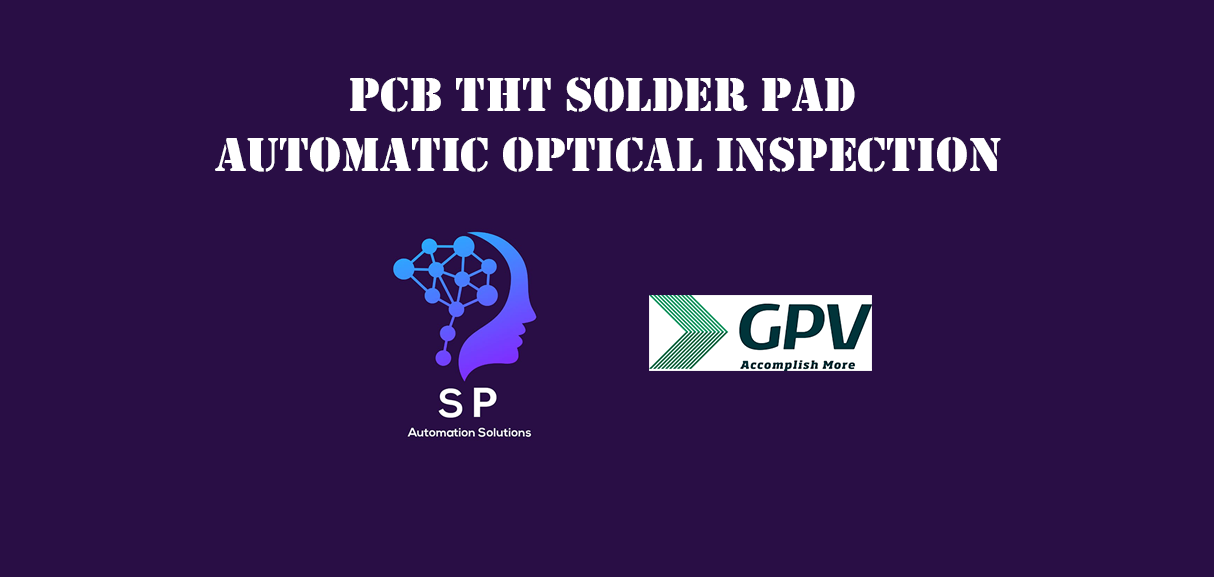
<style>
.page{position:relative;width:1214px;height:577px;background:#290e45}
.page>*{position:absolute;margin:0}
.t1{font:50px "Stencil";color:#ffffff}
</style>
<div class="page">
<p class="t1" style="left:215px;top:77px;width:786px;height:95px;text-align:center">PCB THT Solder Pad <br>Automatic Optical Inspection</p>
</div>
